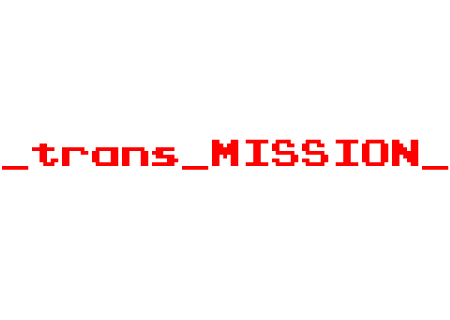
<style>
.page{position:relative;width:450px;height:320px;background:#ffffff}
.page>*{position:absolute;margin:0}
.t1{font:30px "PressStartK";color:#ff0000}
</style>
<div class="page">
<p class="t1" style="left:2px;top:139px;width:447px;height:31px">_trans_MISSION_</p>
</div>
